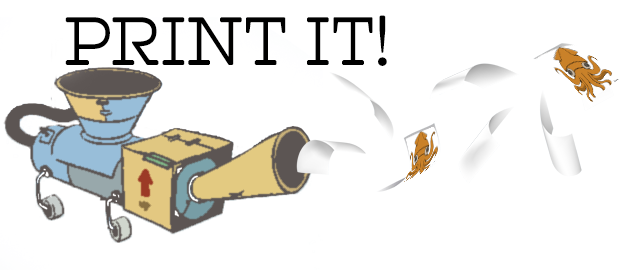
<style>
.page{position:relative;width:630px;height:270px;background:#ffffff}
.page>*{position:absolute;margin:0}
.t1{font:68px "Hatch-Light";color:#000000}
</style>
<div class="page">
<p class="t1" style="left:65px;top:15px;width:322px;height:51px">PRINT IT!</p>
</div>
